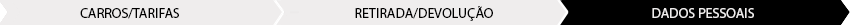
<style>
.page{position:relative;width:850px;height:25px;background:#efeded}
.page>*{position:absolute;margin:0}
.t1{font:14px "MyriadPro-Regular";color:#000000}
.t2{font:14px "MyriadPro-Regular";color:#efeded}
</style>
<div class="page">
<p class="t1" style="left:355px;top:6px;width:138px;height:15px">RETIRADA/DEVOLUÇÃO</p>
<p class="t1" style="left:80px;top:8px;width:99px;height:11px">CARROS/TARIFAS</p>
<p class="t2" style="left:652px;top:8px;width:102px;height:10px">DADOS PESSOAIS</p>
</div>
